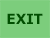
<style>
.page{position:relative;width:50px;height:38px;background:#7ccd7c}
.page>*{position:absolute;margin:0}
.t1{font:13.9px "Verdana-Bold";color:#004f00}
</style>
<div class="page">
<p class="t1" style="left:7px;top:13px;width:36px;height:11px">EXIT</p>
</div>
